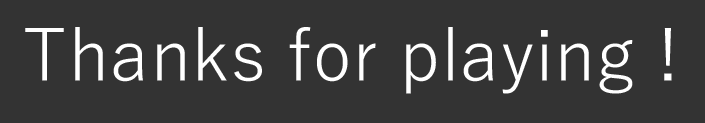
<style>
.page{position:relative;width:705px;height:123px;background:#333333}
.page>*{position:absolute;margin:0}
.t1{font:71.9px "YuGothic-Regular";color:#ffffff}
</style>
<div class="page">
<p class="t1" style="left:25px;top:27px;width:647px;height:67px">Thanks for playing !</p>
</div>
